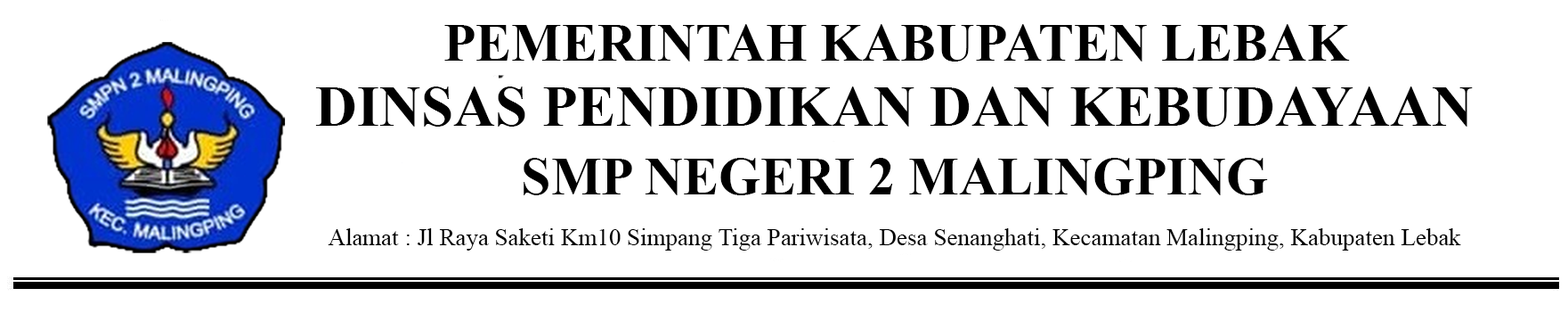
<style>
.page{position:relative;width:1568px;height:313px;background:#ffffff}
.page>*{position:absolute;margin:0}
.t1{font:53.4px "TimesNewRomanPS-BoldMT";color:#000000}
.t2{font:57.9px "TimesNewRomanPS-BoldMT";color:#000000}
.t3{font:24px "TimesNewRomanPSMT";color:#000000}
</style>
<div class="page">
<p class="t1" style="left:444px;top:24px;width:906px;height:37px">PEMERINTAH KABUPATEN LEBAK</p>
<p class="t2" style="left:315px;top:86px;width:1158px;height:40px">DINSAS PENDIDIKAN DAN KEBUDAYAAN</p>
<p class="t1" style="left:524px;top:158px;width:744px;height:37px">SMP NEGERI 2 MALINGPING</p>
<p class="t3" style="left:328px;top:228px;width:1133px;height:22px">Alamat : Jl Raya Saketi Km10 Simpang Tiga Pariwisata, Desa Senanghati, Kecamatan Malingping, Kabupaten Lebak</p>
</div>
